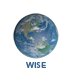
<style>
.page{position:relative;width:72px;height:72px;background:#ffffff}
.page>*{position:absolute;margin:0}
.t1{font:8px "AvenirNextLTPro-Demi";color:#3a648d}
</style>
<div class="page">
<p class="t1" style="left:26px;top:62px;width:20px;height:6px">WISE</p>
</div>
